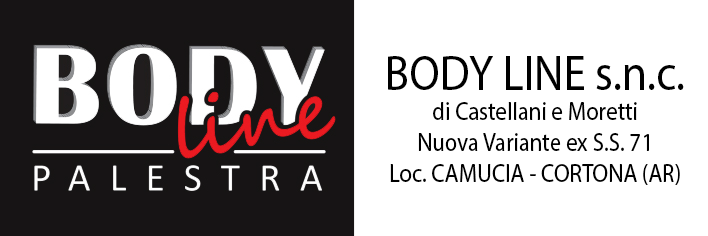
<style>
.page{position:relative;width:708px;height:236px;background:#ffffff}
.page>*{position:absolute;margin:0}
.t1{font:25.4px "MyriadPro-Regular";color:#000000;scale:0.9 1}
.t2{font:50px "MyriadPro-Regular";color:#000000;scale:0.9 1}
</style>
<div class="page">
<p class="t1" style="left:388px;top:56px;width:296px;height:129px;text-align:center"><span class="t2">BODY LINE s.n.c.<br></span>di Castellani e Moretti<br>Nuova Variante ex S.S. 71<br>Loc. CAMUCIA - CORTONA (AR)</p>
</div>
